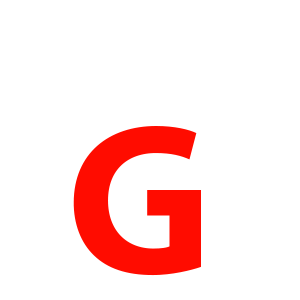
<style>
.page{position:relative;width:300px;height:300px;background:#ffffff}
.page>*{position:absolute;margin:0}
.t1{font:214.5px "MyriadPro-Bold";color:#ff0c00}
</style>
<div class="page">
<p class="t1" style="left:73px;top:126px;width:128px;height:150px">G</p>
</div>
